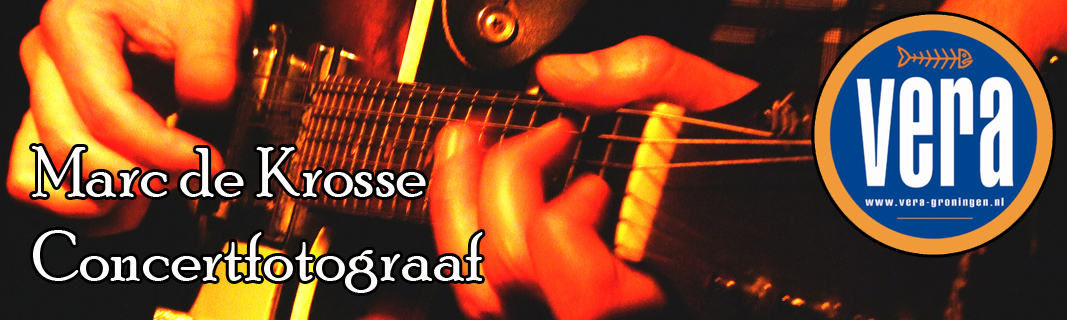
<style>
.page{position:relative;width:1067px;height:320px}
.page>*{position:absolute;margin:0}
.t1{font:70px "PoorRichard-Regular";color:#fefcfb}
</style>
<div class="page">
<p class="t1" style="left:32px;top:146px;width:451px;height:147px">Marc de Krosse<br>Concertfotograaf</p>
</div>
